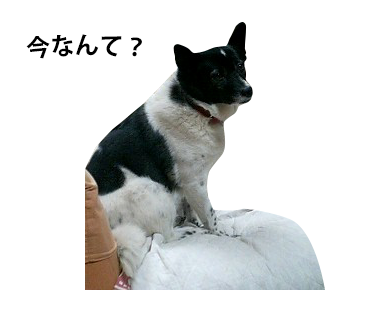
<style>
.page{position:relative;width:370px;height:320px;background:#ffffff}
.page>*{position:absolute;margin:0}
.t1{font:24px "KozGoPr6N-Bold";color:#000000}
</style>
<div class="page">
<p class="t1" style="left:26px;top:34px;width:116px;height:25px">今なんて？</p>
</div>
